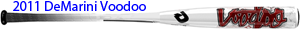
<style>
.page{position:relative;width:300px;height:29px;background:#ffffff}
.page>*{position:absolute;margin:0}
.t1{font:14px "MyriadPro-Regular";color:#0000ff}
</style>
<div class="page">
<p class="t1" style="left:13px;top:1px;width:133px;height:10px">2011 DeMarini Voodoo</p>
</div>
